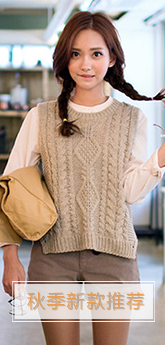
<style>
.page{position:relative;width:165px;height:345px}
.page>*{position:absolute;margin:0}
.t1{font:18px "MicrosoftYaHei";letter-spacing:0.1em;color:#e79e53}
</style>
<div class="page">
<p class="t1" style="left:27px;top:291px;width:117px;height:19px">秋季新款推荐</p>
</div>
